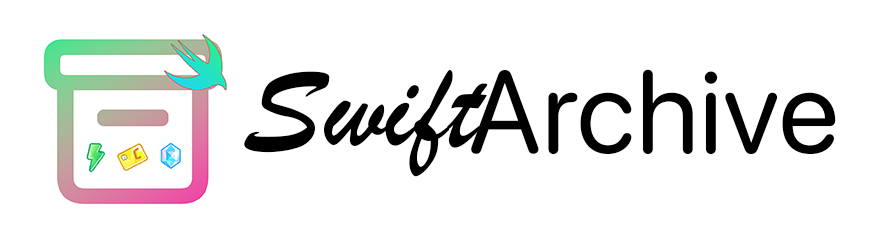
<style>
.page{position:relative;width:883px;height:245px;background:#ffffff}
.page>*{position:absolute;margin:0}
.t1{font:125px "BrushScriptMT";color:#000000}
.t2{font:116.7px "SFProRounded-Regular";color:#000000}
</style>
<div class="page">
<p class="t1" style="left:244px;top:69px;width:244px;height:108px">Swift</p>
<p class="t2" style="left:471px;top:69px;width:365px;height:86px">Archive</p>
</div>
